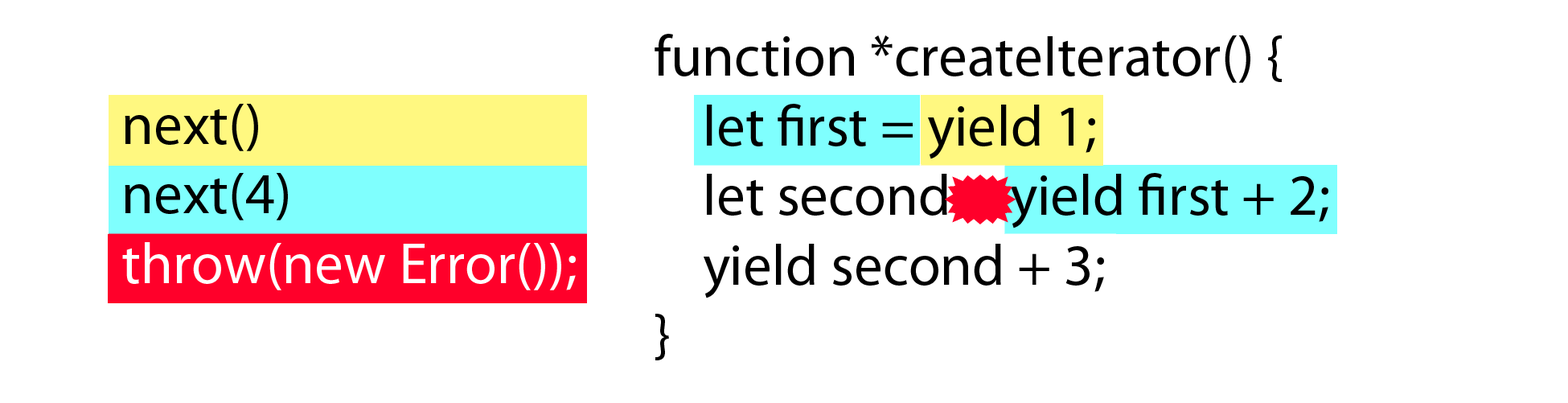
<style>
.page{position:relative;width:1568px;height:403px;background:#ffffff}
.page>*{position:absolute;margin:0}
.t1{font:57.9px "MyriadPro-Regular";color:#000000}
</style>
<div class="page">
<p class="t1" style="left:655px;top:34px;width:673px;height:326px">function *createIterator() {<br>    let first = yield 1;<br>    let second = yield first + 2;<br>    yield second + 3;<br>}</p>
</div>
